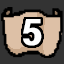
<style>
.page{position:relative;width:64px;height:64px;background:#333333}
.page>*{position:absolute;margin:0}
.t1{font:30px "HeadlineR-HM";color:#feffff}
</style>
<div class="page">
<p class="t1" style="left:23px;top:19px;width:19px;height:27px">5</p>
</div>
